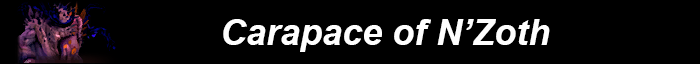
<style>
.page{position:relative;width:700px;height:64px;background:#000000}
.page>*{position:absolute;margin:0}
.t1{font:36px "Arial-BoldItalicMT";color:#fefefe}
</style>
<div class="page">
<p class="t1" style="left:223px;top:19px;width:327px;height:33px">Carapace of N’Zoth</p>
</div>
